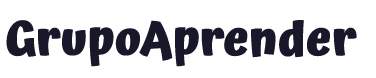
<style>
.page{position:relative;width:376px;height:78px;background:#ffffff}
.page>*{position:absolute;margin:0}
.t1{font:48px "Atma-Bold";color:#18182a}
</style>
<div class="page">
<p class="t1" style="left:6px;top:20px;width:351px;height:47px">GrupoAprender</p>
</div>
